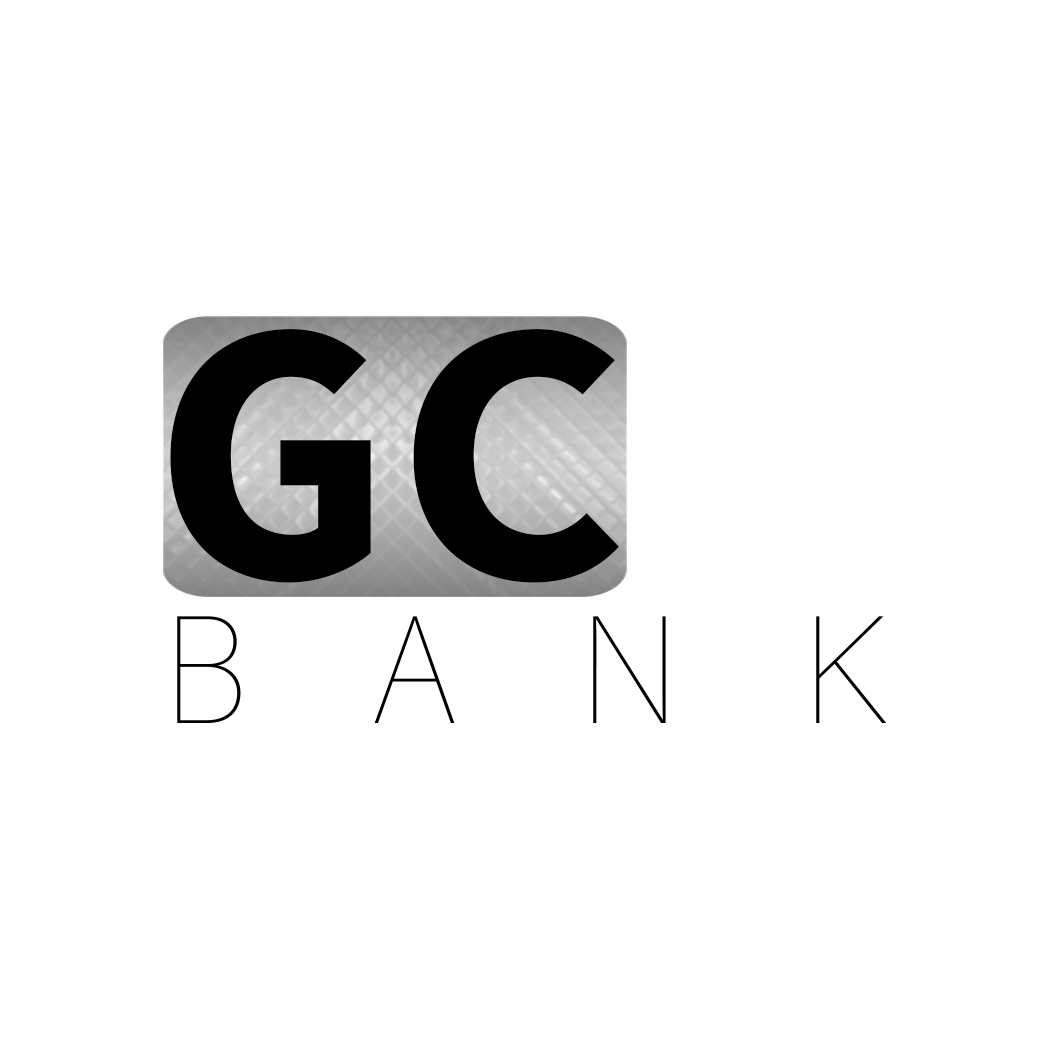
<style>
.page{position:relative;width:1043px;height:1043px;background:#ffffff}
.page>*{position:absolute;margin:0}
.t1{font:375px "SourceCodePro-Bold";color:#000000;scale:1.06 1}
.t2{font:152.7px "AcuminConcept-SemiCondensedThin";letter-spacing:0.8em;color:#000000}
.t3{font:152.7px "AcuminConcept-SemiCondensedThin";color:#000000}
</style>
<div class="page">
<p class="t1" style="left:170px;top:329px;width:449px;height:254px">GC</p>
<p class="t2" style="left:177px;top:616px;width:710px;height:107px">BAN<span class="t3">K</span></p>
</div>
